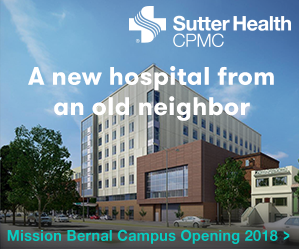
<style>
.page{position:relative;width:299px;height:249px}
.page>*{position:absolute;margin:0}
.t1{font:25px/30.2px "GTWalsheimBold";letter-spacing:0.02em;color:#ffffff}
.t2{font:15px "HelveticaNeueLTStd-Bd";letter-spacing:0.02em;color:#08ccc1;scale:0.96 1}
.t3{font:14.4px "HelveticaNeueLTStd-Bd";letter-spacing:0.02em;color:#08ccc1;scale:1.34 1}
</style>
<div class="page">
<p class="t1" style="left:28px;top:66px;width:246px;height:55px;text-align:center">A new hospital from<br>an old neighbor</p>
<p class="t2" style="left:7px;top:229px;width:271px;height:15px">Mission Bernal Campus Opening 2018</p>
<p class="t3" style="left:283px;top:231px;width:7px;height:10px;rotate:90deg">^</p>
</div>
